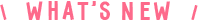
<style>
.page{position:relative;width:201px;height:20px;background:#ffffff}
.page>*{position:absolute;margin:0}
.t1{font:29.2px "Pribambas-Regular";color:#fd6a8b}
.t2{font:22.9px "Pribambas-Regular";color:#fd6a8b}
</style>
<div class="page">
<p class="t1" style="left:0px;top:1px;width:198px;height:19px"><span class="t2">\</span>   what’s New   <span class="t2">/</span></p>
</div>
